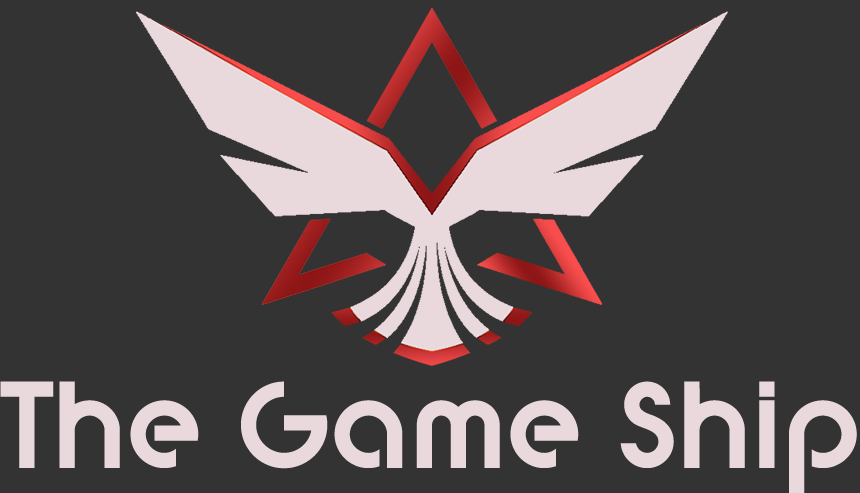
<style>
.page{position:relative;width:860px;height:493px;background:#333333}
.page>*{position:absolute;margin:0}
.t1{font:92px "digitalgeometric-Bold";color:#e9d9dd}
</style>
<div class="page">
<p class="t1" style="left:0px;top:381px;width:857px;height:114px">The Game Ship</p>
</div>
